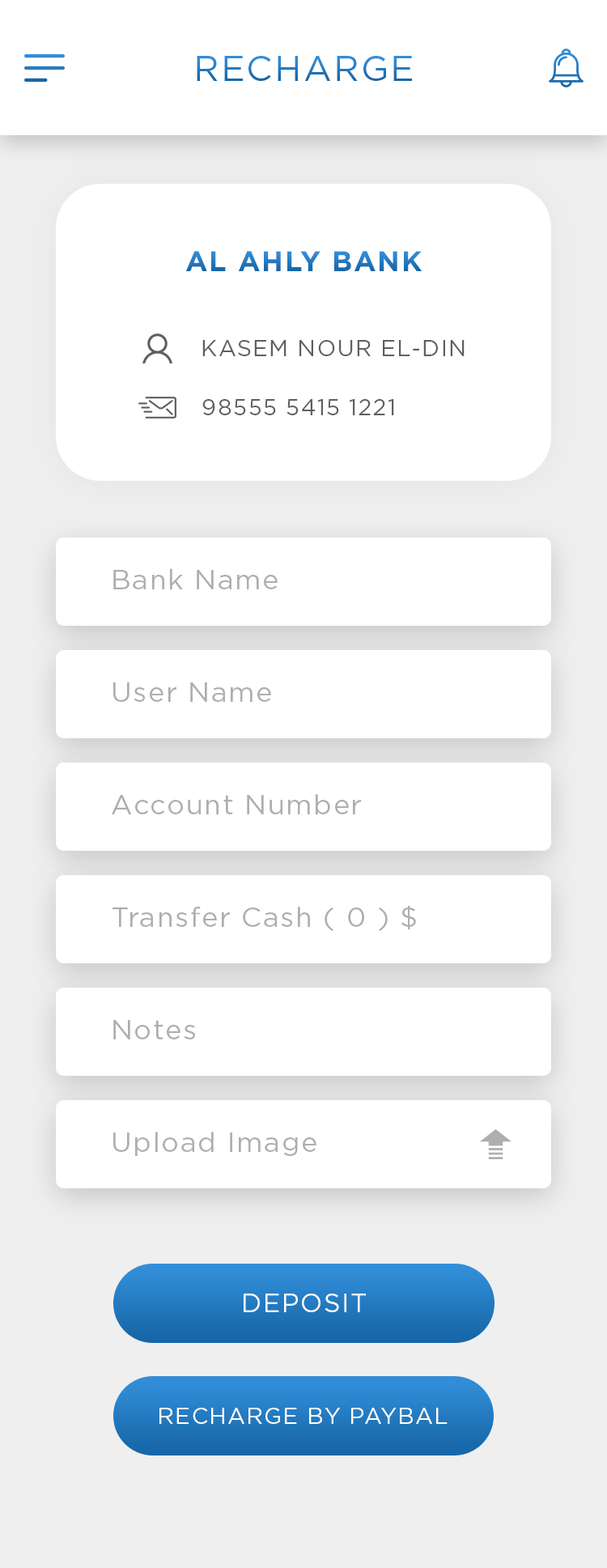
<style>
.page{position:relative;width:607px;height:1568px;background:#ffffff}
.page>*{position:absolute;margin:0}
.t1{font:35.6px "Gotham-Book";letter-spacing:0.05em;text-transform:uppercase}
.t2{font:28.3px "Gotham-Bold";letter-spacing:0.05em;color:#2277bc}
.t3{font:22.7px "Gotham-Book";letter-spacing:0.05em;color:#5f5f5f;text-transform:uppercase}
.t4{font:22.7px "Gotham-Book";letter-spacing:0.05em;color:#5f5f5f}
.t5{font:27.5px "Gotham-Book";letter-spacing:0.05em;color:#aeaeae}
.t6{font:25.9px "Gotham-Book";letter-spacing:0.05em;color:#fefefe;text-transform:uppercase}
.t7{font:22.7px "Gotham-Book";letter-spacing:0.05em;color:#ffffff;text-transform:uppercase}
</style>
<div class="page">
<p class="t1" style="left:197px;top:56px;width:215px;height:25px">RECHARGE</p>
<p class="t2" style="left:185px;top:251px;width:238px;height:20px">AL AHLY BANK</p>
<p class="t3" style="left:202px;top:340px;width:263px;height:16px">KASEM NOUR EL-DIN</p>
<p class="t4" style="left:202px;top:399px;width:192px;height:16px">98555 5415 1221</p>
<p class="t5" style="left:113px;top:568px;width:165px;height:21px">Bank Name</p>
<p class="t5" style="left:113px;top:682px;width:158px;height:20px">User Name</p>
<p class="t5" style="left:112px;top:794px;width:249px;height:20px">Account Number</p>
<p class="t5" style="left:113px;top:906px;width:303px;height:25px">Transfer Cash ( 0 ) $</p>
<p class="t5" style="left:113px;top:1020px;width:82px;height:19px">Notes</p>
<p class="t5" style="left:113px;top:1132px;width:204px;height:24px">Upload Image</p>
<p class="t6" style="left:244px;top:1294px;width:122px;height:18px">Deposit</p>
<p class="t7" style="left:159px;top:1408px;width:289px;height:16px">RECHARGE BY PAYBAL</p>
</div>
